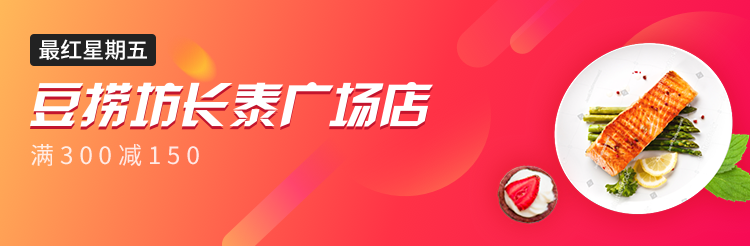
<style>
.page{position:relative;width:750px;height:246px}
.page>*{position:absolute;margin:0}
.t1{font:22px "SourceHanSansCN-Medium";color:#ffffff}
.t2{font:24px "SourceHanSansCN-Regular";letter-spacing:0.25em;color:#ffebe3}
</style>
<div class="page">
<p class="t1" style="left:39px;top:39px;width:108px;height:21px">最红星期五</p>
<p class="t2" style="left:31px;top:144px;width:168px;height:22px">满300减150</p>
</div>
